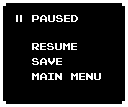
<style>
.page{position:relative;width:128px;height:107px;background:#000000}
.page>*{position:absolute;margin:0}
.t1{font:10px "PixelEmulator";color:#fdfdfd}
.t2{font:10px/15px "PixelEmulator";color:#fdfdfd}
</style>
<div class="page">
<p class="t1" style="left:32px;top:15px;width:46px;height:7px">paused</p>
<p class="t2" style="left:32px;top:43px;width:69px;height:37px">resume<br>save<br>main menu</p>
</div>
